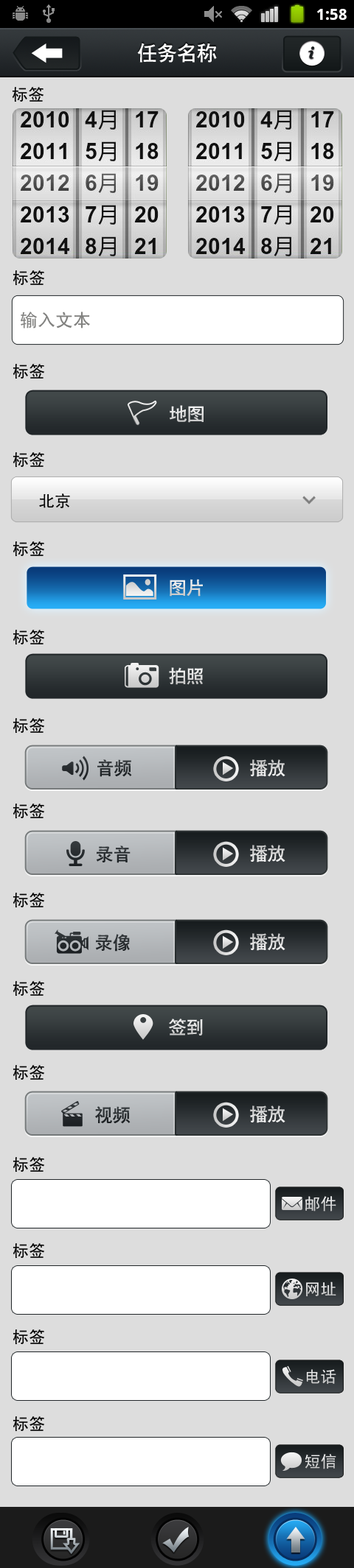
<style>
.page{position:relative;width:354px;height:1568px;background:#dddddd}
.page>*{position:absolute;margin:0}
.t1{font:19.9px "CTCuHeiSJ";color:#ffffff}
.t2{font:16.2px "SimHei";color:#000000}
.t3{font:17.7px "SimHei";color:#81817f}
.t4{font:17.7px "CTCuHeiSJ";color:#e0e0e0}
.t5{font:17.7px "CTCuHeiSJ";color:#dfdfdf}
.t6{font:17.7px "CTCuHeiSJ";color:#282d30}
.t7{font:17.7px "CTCuHeiSJ";color:#dedede}
.t8{font:17.7px "CTCuHeiSJ";color:#2b3033}
.t9{font:17.7px "CTCuHeiSJ";color:#272c2f}
.t10{font:16.2px "SimHei";color:#dedede}
.t11{font:16.2px "SimHei";color:#e2e2e2}
.t12{font:16.2px "SimHei";color:#dddddd}
.t13{font:16.2px "SimHei";color:#d7d7d7}
</style>
<div class="page">
<p class="t1" style="left:137px;top:43px;width:80px;height:20px">任务名称</p>
<p class="t2" style="left:12px;top:87px;width:31px;height:15px">标签</p>
<p class="t2" style="left:13px;top:270px;width:31px;height:16px">标签</p>
<p class="t3" style="left:21px;top:312px;width:69px;height:16px">输入文本</p>
<p class="t2" style="left:13px;top:364px;width:31px;height:15px">标签</p>
<p class="t4" style="left:169px;top:405px;width:34px;height:18px">地图</p>
<p class="t2" style="left:13px;top:452px;width:31px;height:16px">标签</p>
<p class="t2" style="left:39px;top:493px;width:31px;height:15px">北京</p>
<p class="t2" style="left:13px;top:541px;width:31px;height:16px">标签</p>
<p class="t5" style="left:169px;top:579px;width:34px;height:18px">图片</p>
<p class="t2" style="left:13px;top:630px;width:31px;height:15px">标签</p>
<p class="t4" style="left:169px;top:667px;width:34px;height:18px">拍照</p>
<p class="t2" style="left:13px;top:718px;width:31px;height:16px">标签</p>
<p class="t6" style="left:97px;top:759px;width:35px;height:18px">音频</p>
<p class="t7" style="left:250px;top:759px;width:35px;height:18px">播放</p>
<p class="t2" style="left:13px;top:804px;width:31px;height:15px">标签</p>
<p class="t8" style="left:96px;top:845px;width:34px;height:18px">录音</p>
<p class="t7" style="left:250px;top:845px;width:35px;height:17px">播放</p>
<p class="t2" style="left:13px;top:893px;width:31px;height:15px">标签</p>
<p class="t8" style="left:96px;top:934px;width:34px;height:18px">录像</p>
<p class="t7" style="left:250px;top:933px;width:35px;height:18px">播放</p>
<p class="t2" style="left:13px;top:981px;width:31px;height:15px">标签</p>
<p class="t5" style="left:169px;top:1019px;width:34px;height:17px">签到</p>
<p class="t2" style="left:13px;top:1065px;width:31px;height:15px">标签</p>
<p class="t9" style="left:95px;top:1106px;width:35px;height:18px">视频</p>
<p class="t7" style="left:250px;top:1105px;width:35px;height:18px">播放</p>
<p class="t2" style="left:13px;top:1157px;width:31px;height:16px">标签</p>
<p class="t10" style="left:305px;top:1196px;width:31px;height:16px">邮件</p>
<p class="t2" style="left:13px;top:1243px;width:31px;height:16px">标签</p>
<p class="t11" style="left:306px;top:1282px;width:30px;height:15px">网址</p>
<p class="t2" style="left:13px;top:1329px;width:31px;height:16px">标签</p>
<p class="t12" style="left:306px;top:1369px;width:30px;height:16px">电话</p>
<p class="t2" style="left:13px;top:1416px;width:31px;height:16px">标签</p>
<p class="t13" style="left:304px;top:1454px;width:32px;height:15px">短信</p>
</div>
